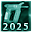
<style>
.page{position:relative;width:32px;height:32px}
.page>*{position:absolute;margin:0}
.t1{font:9.2px "AdobeHeitiStd-Regular";letter-spacing:0.18em}
</style>
<div class="page">
<p class="t1" style="left:3px;top:23px;width:25px;height:7px">2025</p>
</div>
